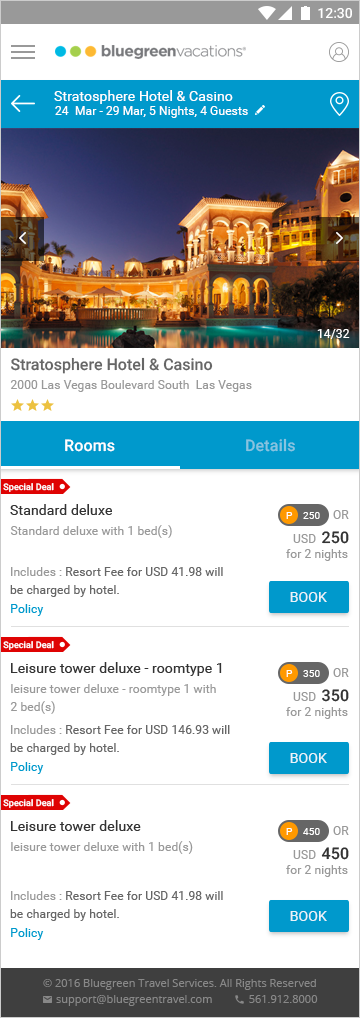
<style>
.page{position:relative;width:360px;height:1018px;background:#ffffff}
.page>*{position:absolute;margin:0}
.t1{font:14px "Roboto-Regular";letter-spacing:0.01em;color:#ffffff}
.t2{font:12px "Roboto-Regular";letter-spacing:0.01em;color:#ffffff}
.t3{font:16px "Roboto-Medium";color:#666666}
.t4{font:12px "Roboto-Regular";letter-spacing:0.01em;color:#999999}
.t5{font:16px "Roboto-Medium";letter-spacing:0.01em;color:#88c4e0}
.t6{font:16px "Roboto-Medium";letter-spacing:0.01em;color:#ffffff}
.t7{font:9px "Roboto-Medium";letter-spacing:0.01em;color:#ffffff}
.t8{font:14px "Roboto-Regular";letter-spacing:0.01em;color:#333333}
.t9{font:10px "Roboto-Regular";letter-spacing:0.01em;color:#ffffff}
.t10{font:16px "Roboto-Medium";letter-spacing:0.01em;color:#333333}
.t11{font:12px/18px "Roboto-Regular";letter-spacing:0.01em;color:#666666}
.t12{font:12px/18px "Roboto-Regular";letter-spacing:0.01em;color:#999999}
.t13{font:14px "Roboto-Regular";letter-spacing:0.01em;color:#ffffff;text-transform:uppercase}
.t14{font:12px "Roboto-Regular";letter-spacing:0.01em;color:#0099cc}
</style>
<div class="page">
<p class="t1" style="left:54px;top:90px;width:179px;height:14px">Stratosphere Hotel &amp; Casino</p>
<p class="t2" style="left:55px;top:106px;width:193px;height:12px"><span class="t1"><br></span>24  Mar - 29 Mar, 5 Nights, 4 Guests</p>
<p class="t2" style="left:317px;top:329px;width:33px;height:10px">14/32</p>
<p class="t3" style="left:11px;top:357px;width:202px;height:17px">Stratosphere Hotel &amp; Casino</p>
<p class="t4" style="left:10px;top:380px;width:242px;height:12px">2000 Las Vegas Boulevard South  Las Vegas</p>
<p class="t5" style="left:246px;top:438px;width:49px;height:14px">Details</p>
<p class="t6" style="left:65px;top:439px;width:50px;height:13px">Rooms</p>
<p class="t7" style="left:3px;top:483px;width:51px;height:9px">Special Deal</p>
<p class="t8" style="left:10px;top:504px;width:102px;height:11px">Standard deluxe</p>
<p class="t4" style="left:333px;top:510px;width:16px;height:9px">OR</p>
<p class="t9" style="left:286px;top:512px;width:7px;height:7px">P</p>
<p class="t9" style="left:303px;top:512px;width:17px;height:7px">250</p>
<p class="t4" style="left:10px;top:525px;width:162px;height:13px">Standard deluxe with 1 bed(s)</p>
<p class="t4" style="left:293px;top:534px;width:23px;height:9px">USD</p>
<p class="t10" style="left:322px;top:531px;width:27px;height:13px">250</p>
<p class="t4" style="left:286px;top:549px;width:62px;height:12px">for 2 nights</p>
<p class="t11" style="left:10px;top:567px;width:213px;height:30px"><span class="t12">Includes : </span>Resort Fee for USD 41.98 will <br>be charged by hotel.</p>
<p class="t13" style="left:290px;top:592px;width:37px;height:10px;opacity:0.87">BOOK</p>
<p class="t14" style="left:11px;top:604px;width:33px;height:12px">Policy</p>
<p class="t7" style="left:3px;top:641px;width:51px;height:9px">Special Deal</p>
<p class="t8" style="left:11px;top:662px;width:211px;height:14px">Leisure tower deluxe - roomtype 1</p>
<p class="t9" style="left:286px;top:670px;width:7px;height:7px">P</p>
<p class="t9" style="left:303px;top:670px;width:17px;height:7px">350</p>
<p class="t4" style="left:333px;top:668px;width:16px;height:9px">OR</p>
<p class="t12" style="left:10px;top:684px;width:206px;height:30px">leisure tower deluxe - roomtype 1 with <br>2 bed(s)</p>
<p class="t10" style="left:322px;top:689px;width:27px;height:13px">350</p>
<p class="t4" style="left:293px;top:692px;width:23px;height:9px">USD</p>
<p class="t4" style="left:286px;top:707px;width:62px;height:12px">for 2 nights</p>
<p class="t11" style="left:10px;top:725px;width:220px;height:30px"><span class="t12">Includes : </span>Resort Fee for USD 146.93 will<br>be charged by hotel.</p>
<p class="t13" style="left:290px;top:753px;width:37px;height:10px;opacity:0.87">BOOK</p>
<p class="t14" style="left:11px;top:762px;width:33px;height:12px">Policy</p>
<p class="t7" style="left:3px;top:799px;width:51px;height:9px">Special Deal</p>
<p class="t8" style="left:11px;top:820px;width:130px;height:11px">Leisure tower deluxe</p>
<p class="t9" style="left:286px;top:828px;width:7px;height:7px">P</p>
<p class="t9" style="left:303px;top:828px;width:17px;height:7px">450</p>
<p class="t4" style="left:333px;top:826px;width:16px;height:9px">OR</p>
<p class="t4" style="left:11px;top:841px;width:182px;height:13px">leisure tower deluxe with 1 bed(s)</p>
<p class="t4" style="left:293px;top:850px;width:23px;height:9px">USD</p>
<p class="t10" style="left:321px;top:847px;width:28px;height:13px">450</p>
<p class="t4" style="left:286px;top:865px;width:62px;height:12px">for 2 nights</p>
<p class="t11" style="left:10px;top:891px;width:213px;height:30px"><span class="t12">Includes : </span>Resort Fee for USD 41.98 will<br>be charged by hotel.</p>
<p class="t13" style="left:290px;top:911px;width:37px;height:10px;opacity:0.87">BOOK</p>
<p class="t14" style="left:11px;top:928px;width:33px;height:12px">Policy</p>
</div>
